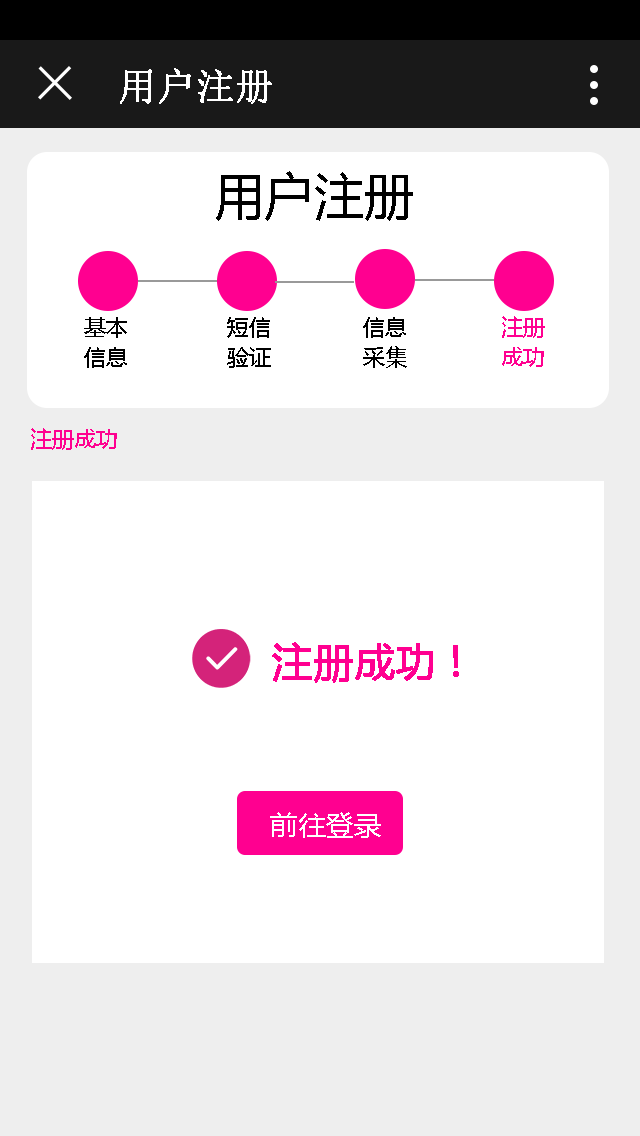
<style>
.page{position:relative;width:640px;height:1136px;background:#ffffff}
.page>*{position:absolute;margin:0}
.t1{font:38px "SimSun";color:#ffffff;font-weight:bold}
.t2{font:50px "MicrosoftYaHei";color:#000000}
.t3{font:22px/30px "MicrosoftYaHei";color:#000000}
.t4{font:22px/30px "MicrosoftYaHei";color:#ff0090}
.t5{font:22px "MicrosoftYaHei";color:#ff0090}
.t6{font:40px "MicrosoftYaHei";color:#ff0090;font-weight:bold}
.t7{font:28px "MicrosoftYaHei";color:#ffffff}
</style>
<div class="page">
<p class="t1" style="left:120px;top:68px;width:152px;height:36px">用户注册</p>
<p class="t2" style="left:216px;top:171px;width:197px;height:50px">用户注册</p>
<p class="t3" style="left:84px;top:317px;width:43px;height:51px">基本<br>信息</p>
<p class="t3" style="left:227px;top:317px;width:44px;height:51px">短信<br>验证</p>
<p class="t3" style="left:363px;top:317px;width:44px;height:51px">信息<br>采集</p>
<p class="t4" style="left:502px;top:316px;width:43px;height:51px">注册<br>成功</p>
<p class="t5" style="left:31px;top:428px;width:86px;height:22px">注册成功</p>
<p class="t6" style="left:272px;top:642px;width:187px;height:41px">注册成功！</p>
<p class="t7" style="left:270px;top:812px;width:111px;height:26px">前往登录</p>
</div>
